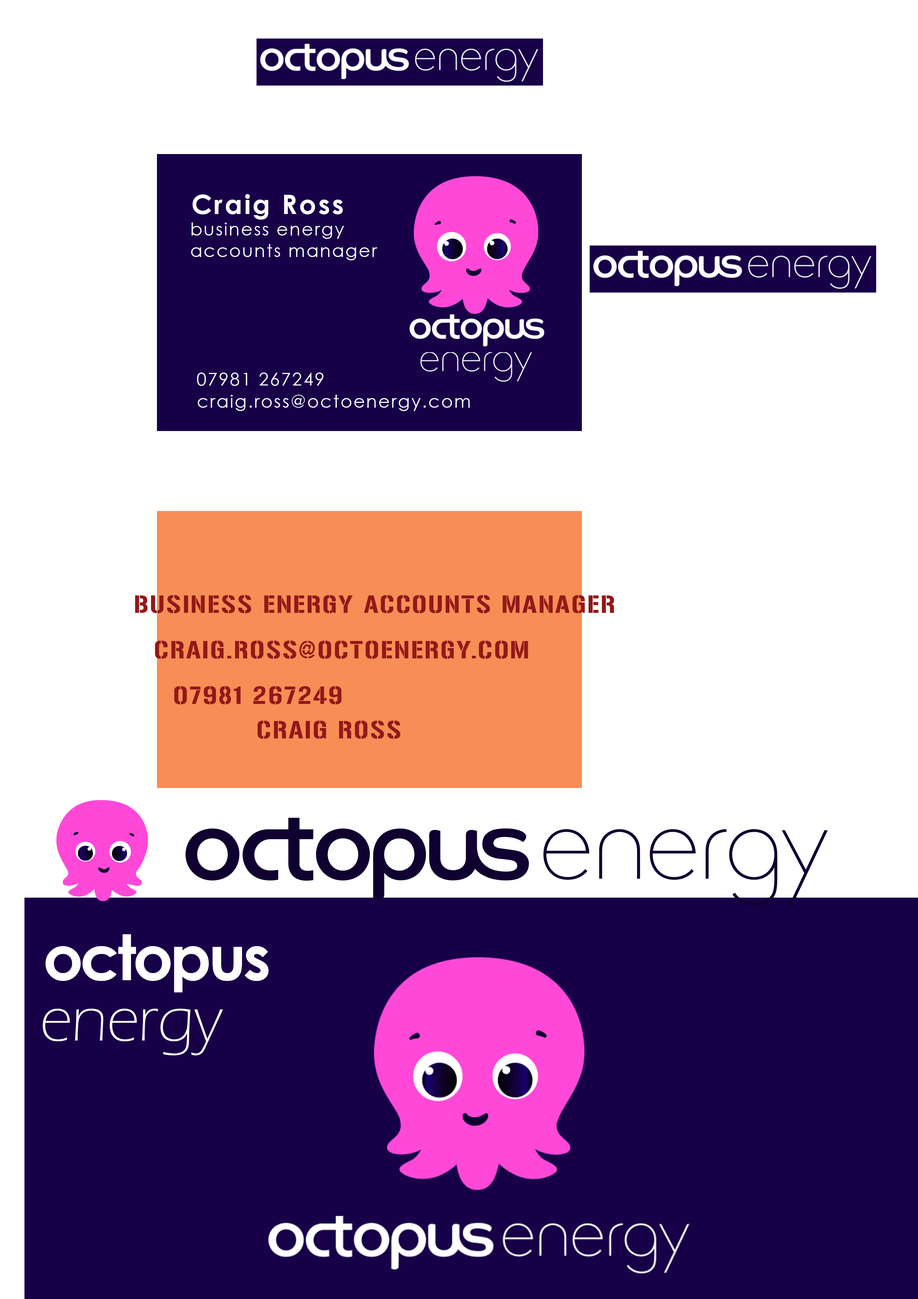
<style>
.page{position:relative;width:918px;height:1299px;background:#ffffff}
.page>*{position:absolute;margin:0}
.t1{font:26.7px "CenturyGothic-Bold";letter-spacing:0.075em;color:#ffffff}
.t2{font:17.8px "CenturyGothic";letter-spacing:0.075em;color:#ffffff}
.t3{font:17.8px "CenturyGothic";letter-spacing:0.075em;color:#ffffff;text-transform:uppercase}
.t4{font:22.2px "Gunplay-Regular";letter-spacing:0.075em;color:#931818;text-transform:uppercase}
.t5{font:62.9px "CenturyGothic-Bold";letter-spacing:-0.05em;color:#ffffff}
.t6{font:62.9px "ErasITC-Light";letter-spacing:-0.005em;color:#ffffff}
</style>
<div class="page">
<p class="t1" style="left:193px;top:194px;width:150px;height:26px">Craig Ross</p>
<p class="t2" style="left:191px;top:223px;width:187px;height:37px">business energy<br>accounts manager</p>
<p class="t3" style="left:197px;top:372px;width:127px;height:14px">07981 267249</p>
<p class="t2" style="left:198px;top:395px;width:272px;height:16px">craig.ross@octoenergy.com</p>
<p class="t4" style="left:135px;top:595px;width:480px;height:18px">Business energy accounts manager</p>
<p class="t4" style="left:155px;top:640px;width:373px;height:19px">Craig.ross@octoenergy.com</p>
<p class="t4" style="left:174px;top:686px;width:168px;height:18px">07981 267249</p>
<p class="t4" style="left:257px;top:720px;width:144px;height:19px">Craig Ross</p>
<p class="t5" style="left:46px;top:934px;width:223px;height:58px">octopus</p>
<p class="t6" style="left:43px;top:1008px;width:180px;height:47px">energy</p>
</div>
